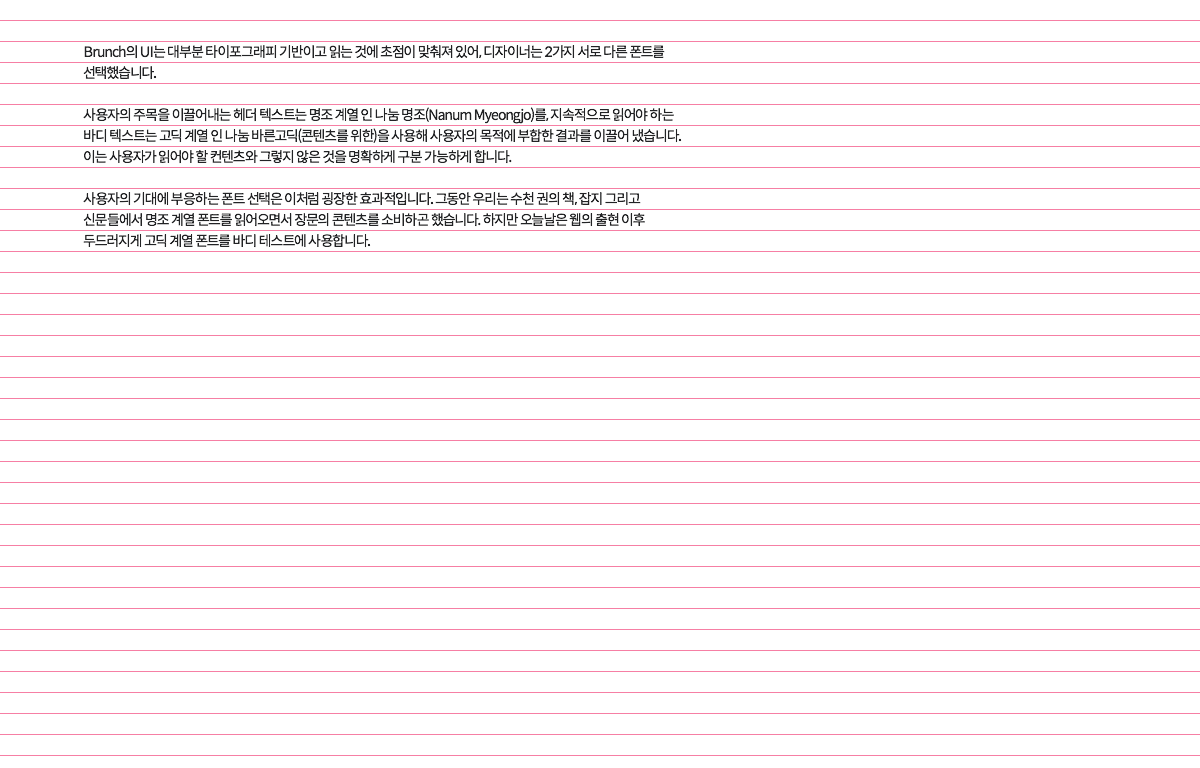
<style>
.page{position:relative;width:1200px;height:768px;background:#ffffff}
.page>*{position:absolute;margin:0}
.t1{font:14px "SpoqaHanSans-Regular";letter-spacing:-0.064em;color:#222325}
</style>
<div class="page">
<p class="t1" style="left:83px;top:45px;width:599px;height:203px">Brunch의 UI는 대부분 타이포그래피 기반이고 읽는 것에 초점이 맞춰져 있어, 디자이너는 2가지 서로 다른 폰트를 선택했습니다.<br>사용자의 주목을 이끌어내는 헤더 텍스트는 명조 계열 인 나눔 명조(Nanum Myeongjo)를, 지속적으로 읽어야 하는 바디 텍스트는 고딕 계열 인 나눔 바른고딕(콘텐츠를 위한)을 사용해 사용자의 목적에 부합한 결과를 이끌어 냈습니다. 이는 사용자가 읽어야 할 컨텐츠와 그렇지 않은 것을 명확하게 구분 가능하게 합니다.<br>사용자의 기대에 부응하는 폰트 선택은 이처럼 굉장한 효과적입니다. 그동안 우리는 수천 권의 책, 잡지 그리고 신문들에서 명조 계열 폰트를 읽어오면서 장문의 콘텐츠를 소비하곤 했습니다. 하지만 오늘날은 웹의 출현 이후 두드러지게 고딕 계열 폰트를 바디 테스트에 사용합니다.</p>
</div>
